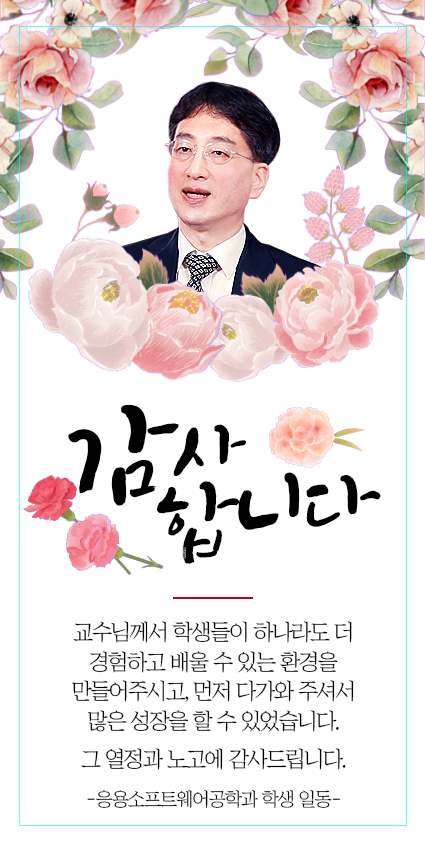
<style>
.page{position:relative;width:425px;height:850px;background:#ffffff}
.page>*{position:absolute;margin:0}
.t1{font:130px/79px "Makgeolli";letter-spacing:-0.1em;color:#000000}
.t2{font:98.9px/79px "Makgeolli";letter-spacing:-0.1em;color:#000000}
.t3{font:98.9px/79px "Makgeolli";letter-spacing:-0.08em;color:#000000}
.t4{font:111px/79px "Makgeolli";letter-spacing:-0.08em;color:#000000}
.t5{font:22.2px/29.6px "ChosunilboNM";letter-spacing:-0.06em;color:#000000}
.t6{font:22.2px/37.8px "ChosunilboNM";letter-spacing:-0.06em;color:#000000}
.t7{font:22.2px/42px "ChosunilboNM";letter-spacing:-0.06em;color:#000000}
.t8{font:19px/42px "ChosunilboNM";letter-spacing:-0.06em;color:#000000}
</style>
<div class="page">
<p class="t1" style="left:68px;top:404px;width:313px;height:160px;rotate:-6deg">감<span class="t2">사<br>          </span><span class="t3">합</span><span class="t4">니</span><span class="t3">다</span></p>
<p class="t5" style="left:72px;top:621px;width:282px;height:188px;text-align:center">교수님께서 학생들이 하나라도 더<br>경험하고 배울 수 있는 환경을<br>만들어주시고, 먼저 다가와 주셔서<br>많<span class="t6">은 성장을 할 수 있었습니다.<br>그</span><span class="t7"> 열정과 노고에 감사드립니다.<br></span><span class="t8">-응용소프트웨어공학과 학생 일동-</span></p>
</div>
